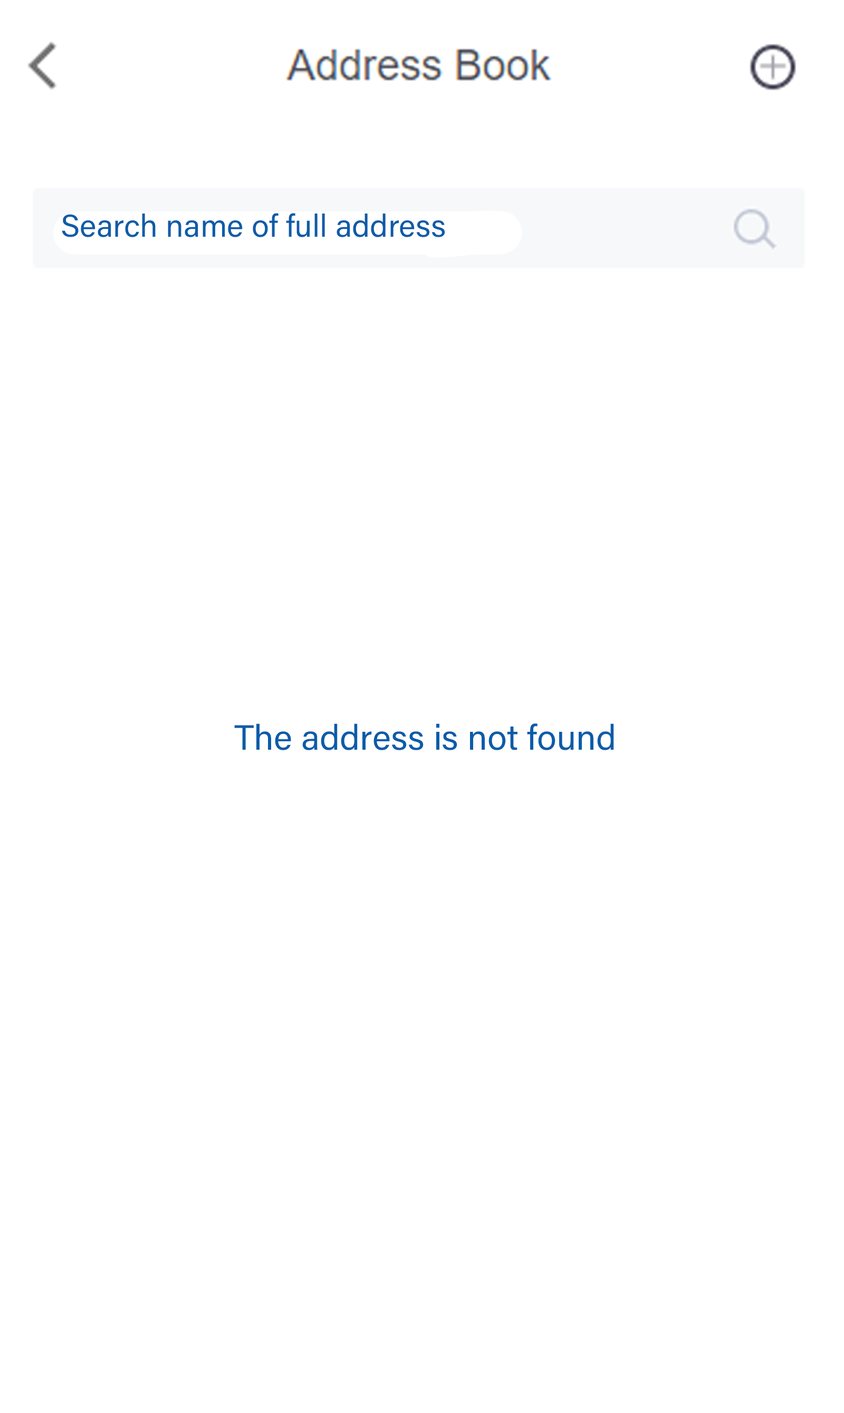
<style>
.page{position:relative;width:844px;height:1413px;background:#ffffff}
.page>*{position:absolute;margin:0}
.t1{font:31.6px "AcuminConcept-Regular";color:#0b5ca9;font-style:italic}
.t2{font:35.3px "AcuminConcept-Regular";color:#0b5ca9;font-style:italic}
</style>
<div class="page">
<p class="t1" style="left:62px;top:213px;width:383px;height:24px">Search name of full address</p>
<p class="t2" style="left:234px;top:724px;width:380px;height:26px">The address is not found</p>
</div>
